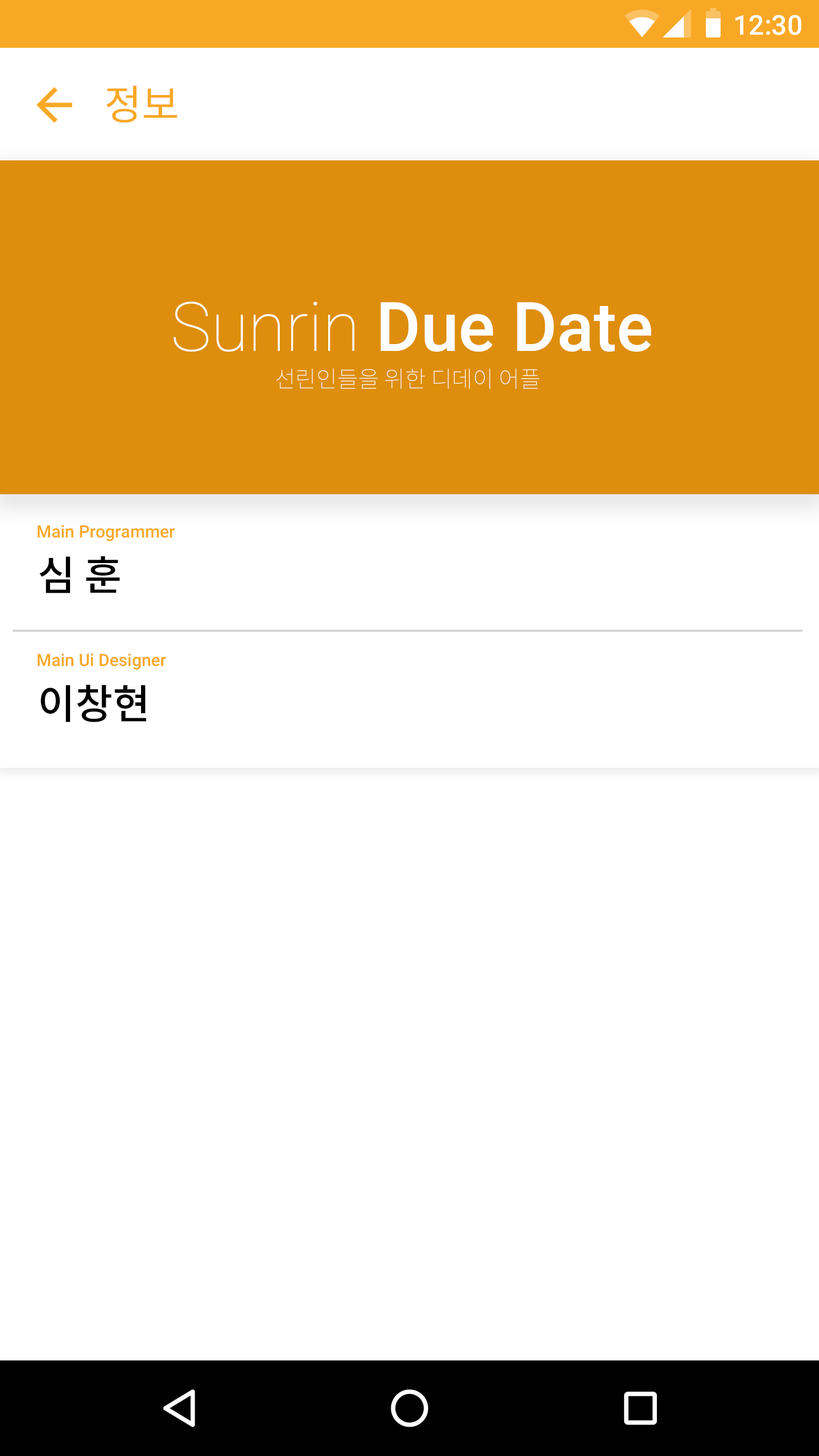
<style>
.page{position:relative;width:819px;height:1456px;background:#ffffff}
.page>*{position:absolute;margin:0}
.t1{font:27.3px "Roboto-Medium";color:#ffffff}
.t2{font:40.9px "NotoSansCJKkr-Regular";color:#f9a825}
.t3{font:68.2px "Roboto-Medium";color:#ffffff}
.t4{font:68.2px "Roboto-Thin";color:#ffffff}
.t5{font:22.7px "NotoSansCJKkr-Thin";color:#ffffff}
.t6{font:17.1px "Roboto-Medium";color:#f9a825}
.t7{font:40.9px "NotoSansCJKkr-Medium";color:#000000}
</style>
<div class="page">
<p class="t1" style="left:735px;top:15px;width:66px;height:20px">12:30</p>
<p class="t2" style="left:106px;top:85px;width:71px;height:38px">정보</p>
<p class="t3" style="left:173px;top:301px;width:478px;height:51px"><span class="t4">Sunrin </span>Due Date</p>
<p class="t5" style="left:276px;top:369px;width:264px;height:20px">선린인들을 위한 디데이 어플</p>
<p class="t6" style="left:38px;top:525px;width:137px;height:16px">Main Programmer</p>
<p class="t7" style="left:39px;top:556px;width:81px;height:37px">심 훈</p>
<p class="t6" style="left:38px;top:653px;width:128px;height:17px">Main Ui Designer</p>
<p class="t7" style="left:40px;top:685px;width:106px;height:37px">이창현</p>
</div>
